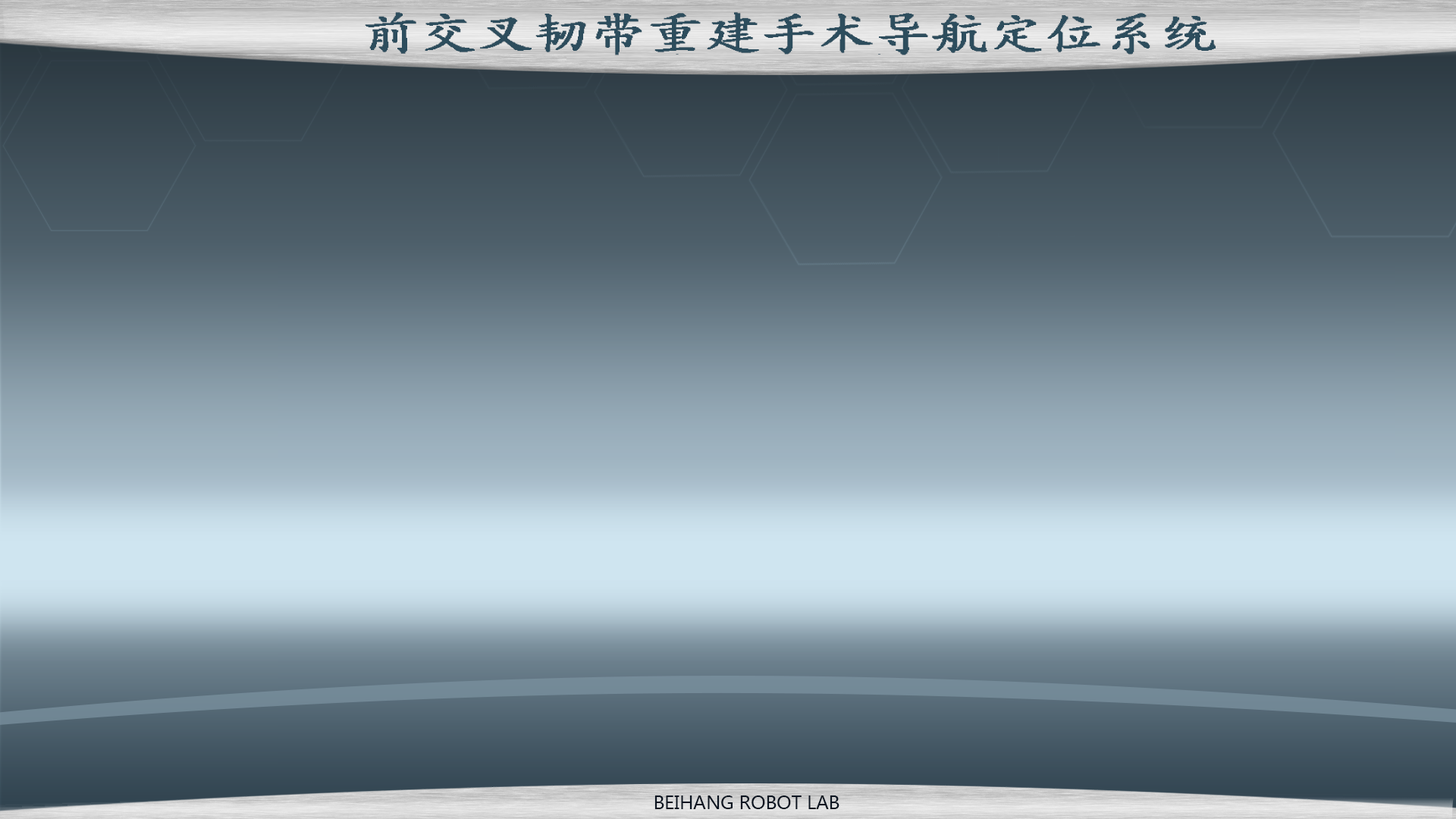
<style>
.page{position:relative;width:1456px;height:819px}
.page>*{position:absolute;margin:0}
.t1{font:45.5px "¿¬Ìå";color:#2d4d5d;font-weight:bold;scale:1.25 1}
</style>
<div class="page">
<p class="t1" style="left:365px;top:12px;width:851px;height:43px">前交叉韧带重建手术导航定位系统</p>
</div>
